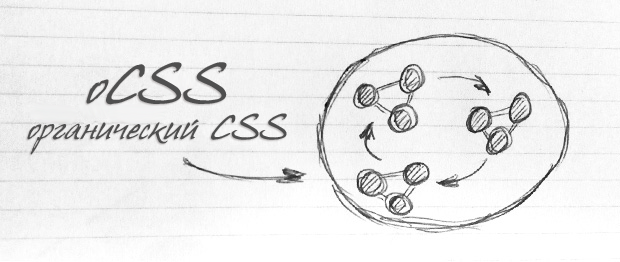
<style>
.page{position:relative;width:620px;height:262px}
.page>*{position:absolute;margin:0}
.t1{font:30px "HansHand-_cyr";color:#4f4f4f}
.t2{font:48px "HansHand-_cyr";color:#4f4f4f}
</style>
<div class="page">
<p class="t1" style="left:27px;top:62px;width:260px;height:93px;text-align:center"><span class="t2">оCSS<br></span>органический CSS</p>
</div>
